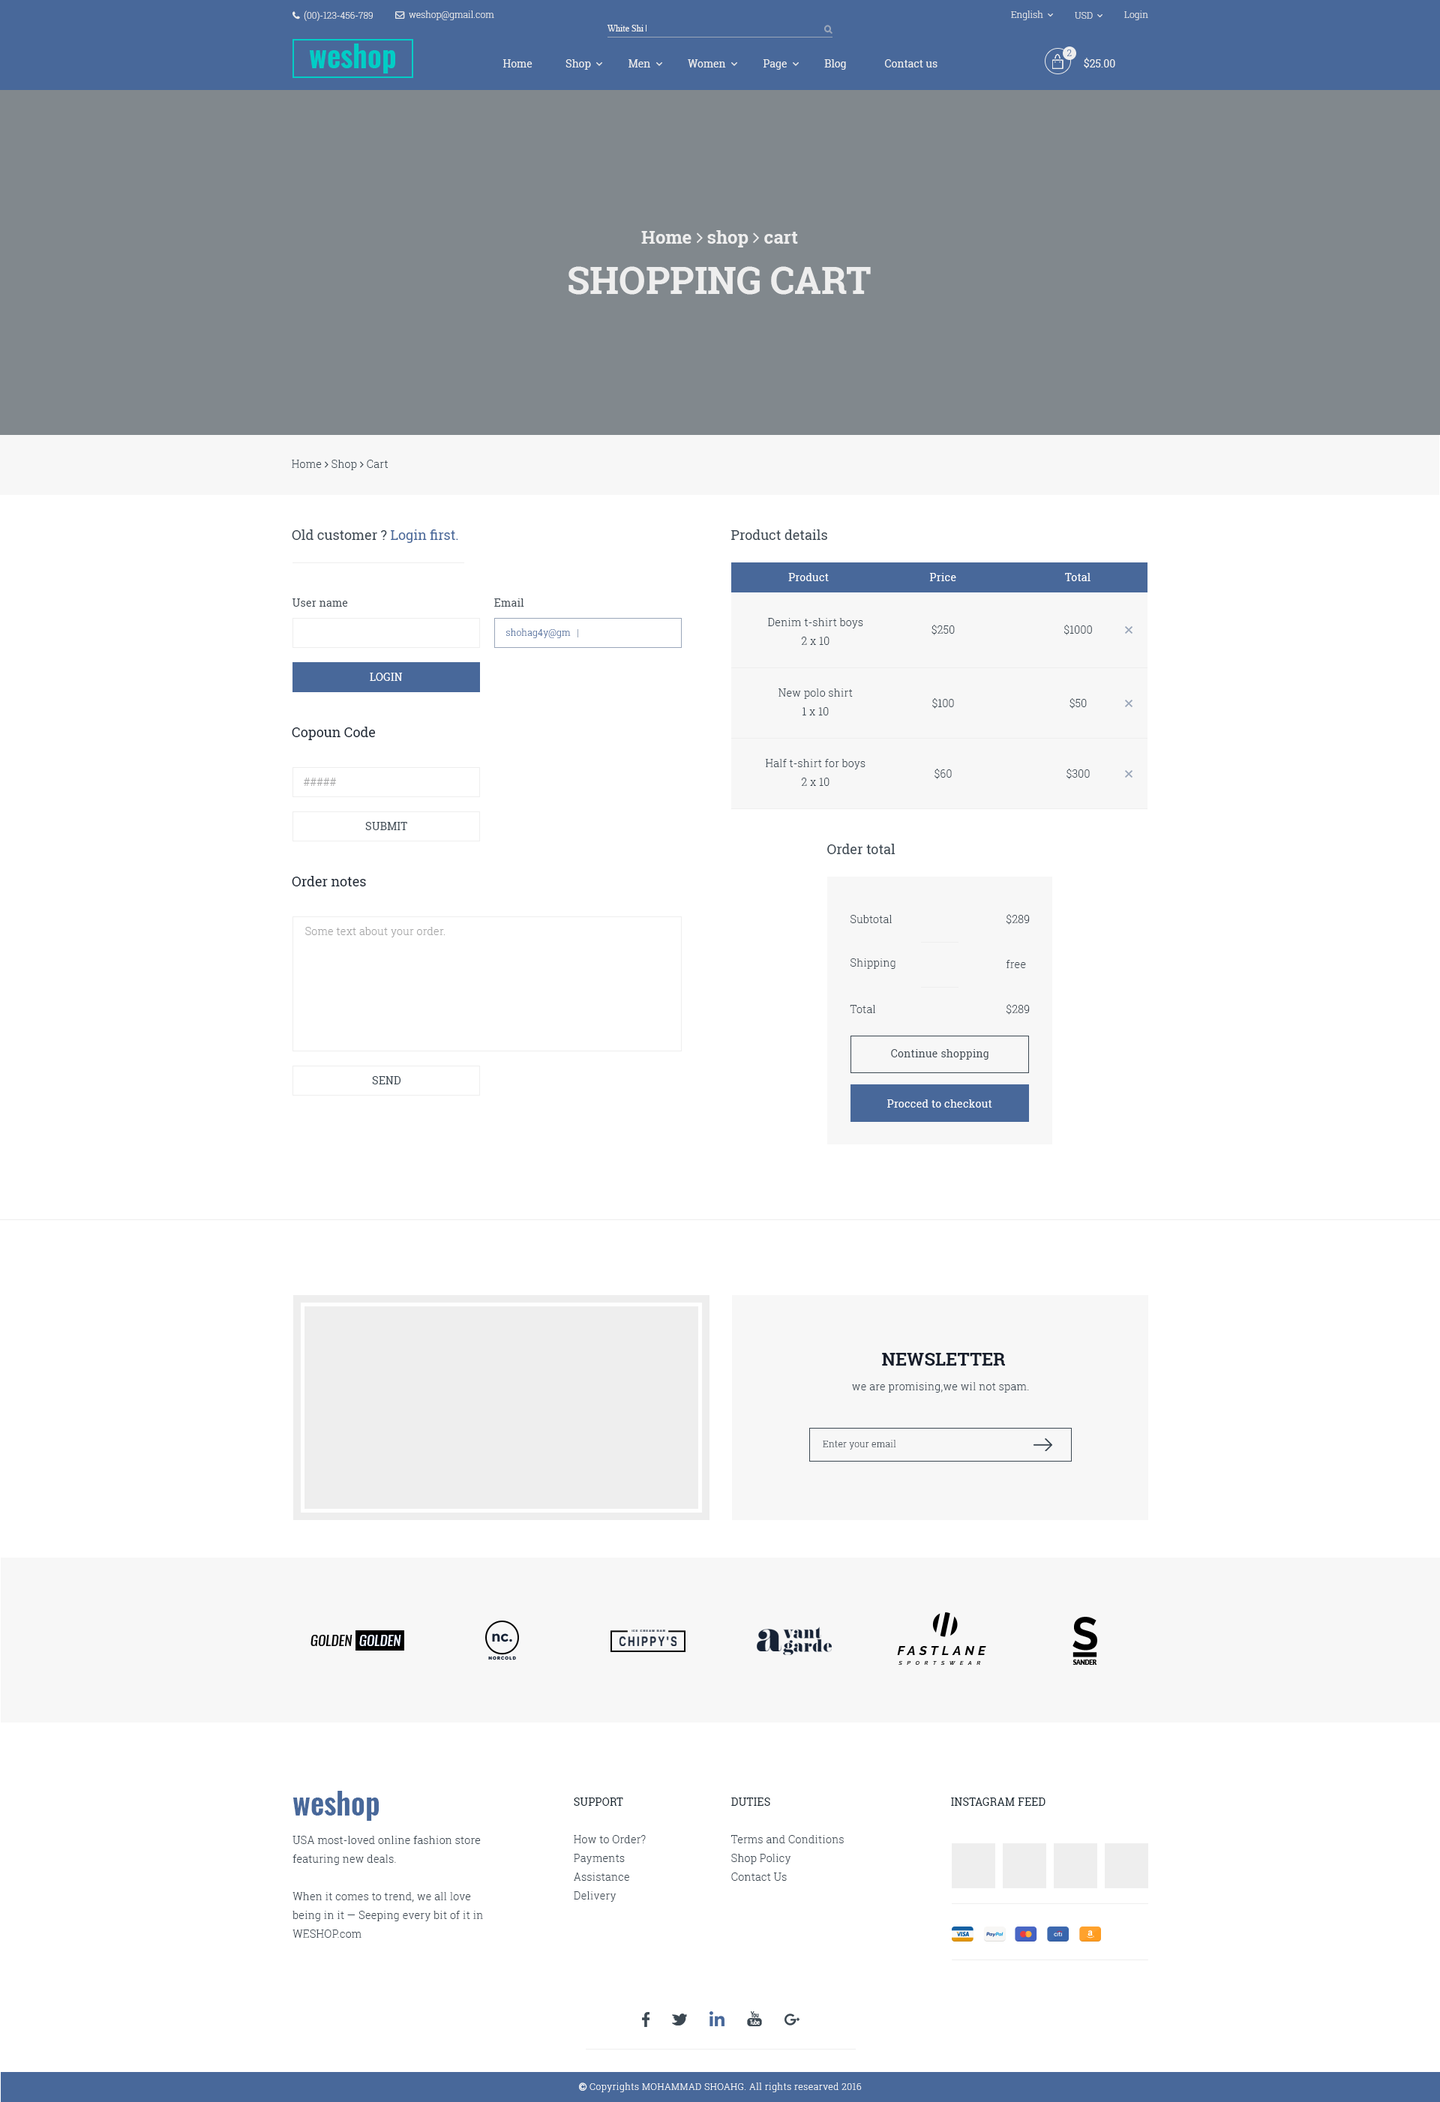
<style>
.page{position:relative;width:1440px;height:2102px;background:#ffffff}
.page>*{position:absolute;margin:0}
.t1{font:9px "RobotoSlab-Light";color:#eeeeee}
.t2{font:9px "TimesNewRomanPSMT";color:#eeeeee}
.t3{font:30px "Oswald-DemiBold";color:#00cdc6}
.t4{font:9px "RobotoSlab-Light"}
.t5{font:10.5px "RobotoSlab-Regular";color:#eeeeee}
.t6{font:37.5px "MyriadPro-Regular";color:#eeeeee;text-transform:uppercase}
.t7{font:9px "RobotoSlab-Regular";color:#3c4852}
.t8{font:9px "RobotoSlab-Regular";color:#48689a}
.t9{font:9px "RobotoSlab-Regular";color:#ffffff}
.t10{font:9px "RobotoSlab-Regular";color:#424c55}
.t11{font:9px "MyriadPro-Regular";color:#48689a}
.t12{font:9px "MyriadPro-Regular";color:#3c4852}
.t13{font:9px "RobotoSlab-Light";color:#3c4852}
.t14{font:9px "RobotoSlab-Regular";color:#1e2835}
.t15{font:9px "MyriadPro-Regular";color:#a3a3a4}
.t16{font:9px "RobotoSlab-Regular";color:#3c4852;text-transform:uppercase}
.t17{font:9px "MyriadPro-Regular";color:#424c55}
.t18{font:9px "MyriadPro-Regular";color:#161d2b}
.t19{font:30px "Oswald-DemiBold";color:#48689a}
.t20{font:9px "RobotoSlab-Regular";color:#15232d}
.t21{font:9px "RobotoSlab-Regular";color:#15232d;text-transform:uppercase}
</style>
<div class="page">
<p class="t1" style="left:1124px;top:10px;width:24px;height:10px">Login</p>
<p class="t2" style="left:607px;top:25px;width:37px;height:7px">White Shi</p>
<p class="t3" style="left:309px;top:44px;width:86px;height:30px">weshop</p>
<p class="t4" style="left:1066px;top:50px;width:6px;height:6px">2</p>
<p class="t5" style="left:1084px;top:58px;width:31px;height:10px">$25.00</p>
<p class="t6" style="left:568px;top:266px;width:303px;height:29px">SHOPPING CART</p>
<p class="t7" style="left:292px;top:530px;width:166px;height:13px">Old customer ?<span class="t8"> Login first.</span></p>
<p class="t7" style="left:731px;top:530px;width:96px;height:10px">Product details</p>
<p class="t9" style="left:788px;top:573px;width:41px;height:8px">Product</p>
<p class="t9" style="left:929px;top:573px;width:27px;height:8px">Price</p>
<p class="t9" style="left:1065px;top:573px;width:25px;height:8px">Total</p>
<p class="t10" style="left:292px;top:598px;width:56px;height:9px">User name</p>
<p class="t10" style="left:494px;top:598px;width:30px;height:9px">Email</p>
<p class="t11" style="left:506px;top:628px;width:65px;height:10px">shohag4y@gm</p>
<p class="t12" style="left:767px;top:618px;width:96px;height:27px;text-align:center">Denim t-shirt boys<br>2 x 10</p>
<p class="t13" style="left:932px;top:625px;width:23px;height:10px">$250</p>
<p class="t13" style="left:1064px;top:625px;width:28px;height:10px">$1000</p>
<p class="t9" style="left:370px;top:673px;width:33px;height:8px">LOGIN</p>
<p class="t12" style="left:778px;top:688px;width:75px;height:28px;text-align:center">New polo shirt<br>1 x 10</p>
<p class="t13" style="left:932px;top:698px;width:22px;height:11px">$100</p>
<p class="t13" style="left:1070px;top:698px;width:17px;height:11px">$50</p>
<p class="t14" style="left:292px;top:727px;width:84px;height:13px">Copoun Code</p>
<p class="t12" style="left:765px;top:759px;width:101px;height:27px;text-align:center">Half t-shirt for boys<br>2 x 10</p>
<p class="t13" style="left:934px;top:769px;width:18px;height:10px">$60</p>
<p class="t13" style="left:1066px;top:769px;width:24px;height:10px">$300</p>
<p class="t15" style="left:304px;top:778px;width:32px;height:8px">#####</p>
<p class="t16" style="left:365px;top:822px;width:42px;height:8px">Submit</p>
<p class="t7" style="left:827px;top:844px;width:69px;height:10px">Order total</p>
<p class="t14" style="left:292px;top:876px;width:74px;height:10px">Order notes</p>
<p class="t17" style="left:850px;top:915px;width:42px;height:8px">Subtotal</p>
<p class="t17" style="left:1006px;top:914px;width:24px;height:11px">$289</p>
<p class="t15" style="left:305px;top:927px;width:140px;height:11px">Some text about your order.</p>
<p class="t17" style="left:850px;top:958px;width:46px;height:11px">Shipping</p>
<p class="t17" style="left:1006px;top:960px;width:20px;height:8px">free</p>
<p class="t17" style="left:850px;top:1005px;width:26px;height:8px">Total</p>
<p class="t17" style="left:1006px;top:1004px;width:24px;height:11px">$289</p>
<p class="t10" style="left:891px;top:1049px;width:97px;height:11px">Continue shopping</p>
<p class="t16" style="left:372px;top:1076px;width:29px;height:8px">send</p>
<p class="t9" style="left:887px;top:1100px;width:105px;height:8px">Procced to checkout</p>
<p class="t18" style="left:882px;top:1353px;width:123px;height:13px">NEWSLETTER</p>
<p class="t12" style="left:852px;top:1382px;width:177px;height:11px">we are promising,we wil not spam.</p>
<p class="t17" style="left:823px;top:1440px;width:73px;height:10px">Enter your email</p>
<p class="t19" style="left:292px;top:1791px;width:87px;height:30px">weshop</p>
<p class="t12" style="left:574px;top:1798px;width:72px;height:104px"><span class="t20">SUPPORT<br><br></span>How to Order?<br>Payments<br>Assistance<br>Delivery</p>
<p class="t13" style="left:731px;top:1798px;width:113px;height:83px"><span class="t20">DUTIES<br><br></span>Terms and Conditions<br>Shop Policy<br>Contact Us</p>
<p class="t21" style="left:951px;top:1798px;width:95px;height:8px">instagram feed</p>
<p class="t12" style="left:292px;top:1836px;width:191px;height:102px">USA most-loved online fashion store featuring new deals.<br><br>When it comes to trend, we all love being in it — Seeping every bit of it in WESHOP.com</p>
</div>
